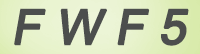
<style>
.page{position:relative;width:200px;height:54px}
.page>*{position:absolute;margin:0}
.t1{font:48px "MicrosoftSansSerif";color:#4c4e4d;font-weight:bold;font-style:italic}
</style>
<div class="page">
<p class="t1" style="left:14px;top:8px;width:175px;height:38px">FWF5</p>
</div>
